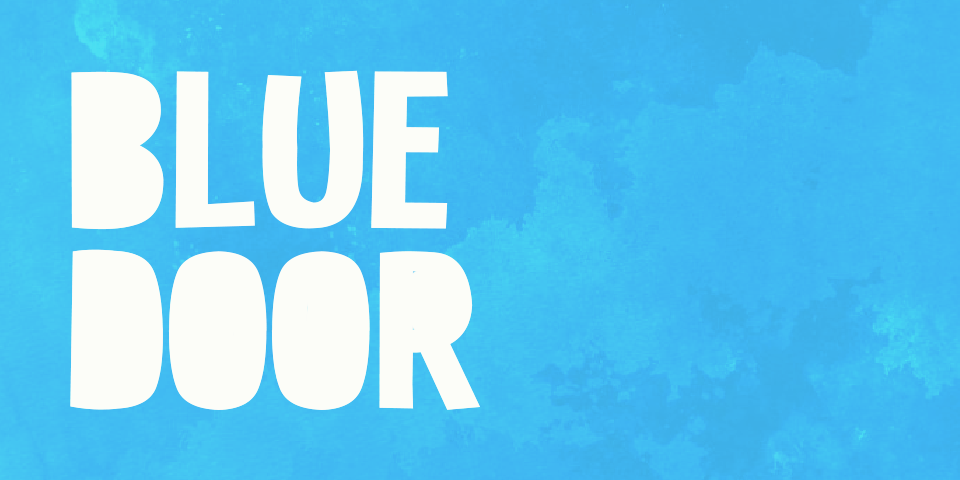
<style>
.page{position:relative;width:960px;height:480px}
.page>*{position:absolute;margin:0}
.t1{font:240px/180px "SingleSleeve";color:#f8f9ee;scale:1.5 1}
</style>
<div class="page">
<p class="t1" style="left:70px;top:70px;width:410px;height:340px">BLUE<br>DOOR</p>
</div>
